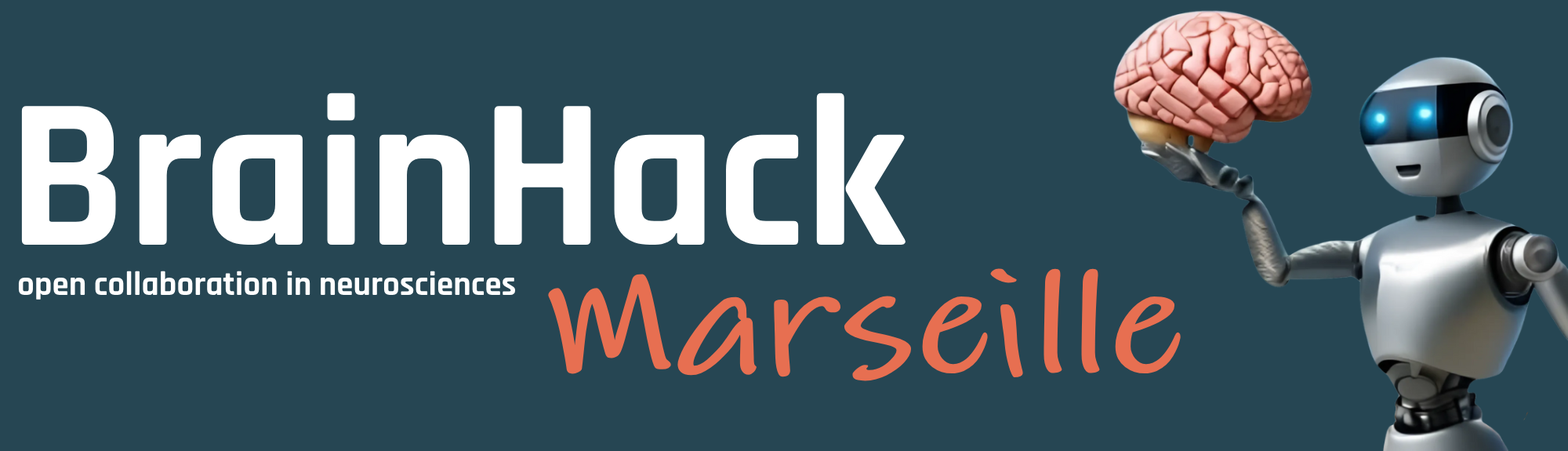
<style>
.page{position:relative;width:1568px;height:451px;background:#264653}
.page>*{position:absolute;margin:0}
.t1{font:215.6px "Rajdhani-Bold";color:#ffffff}
.t2{font:156.8px "LindseyPro-Bold";color:#e76f51}
.t3{font:33.7px "Rajdhani-Bold";color:#ffffff}
</style>
<div class="page">
<p class="t1" style="left:21px;top:93px;width:885px;height:152px">BrainHack</p>
<p class="t2" style="left:548px;top:268px;width:633px;height:113px">Marseille</p>
<p class="t3" style="left:18px;top:270px;width:498px;height:29px">open collaboration in neurosciences</p>
</div>
